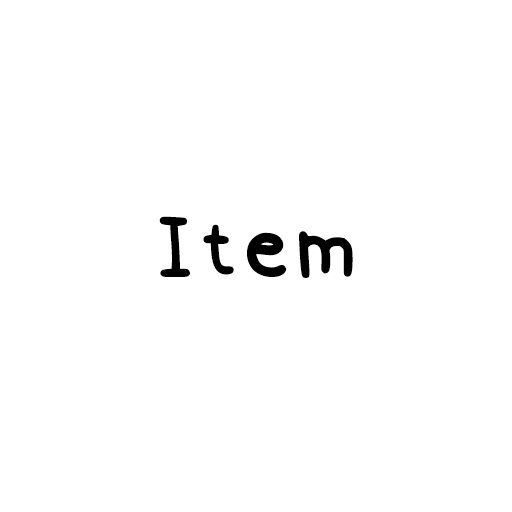
<style>
.page{position:relative;width:512px;height:512px;background:#ffffff}
.page>*{position:absolute;margin:0}
.t1{font:121.9px "Brutal_bounce-Regular";color:#000000}
</style>
<div class="page">
<p class="t1" style="left:159px;top:216px;width:194px;height:62px">Item</p>
</div>
